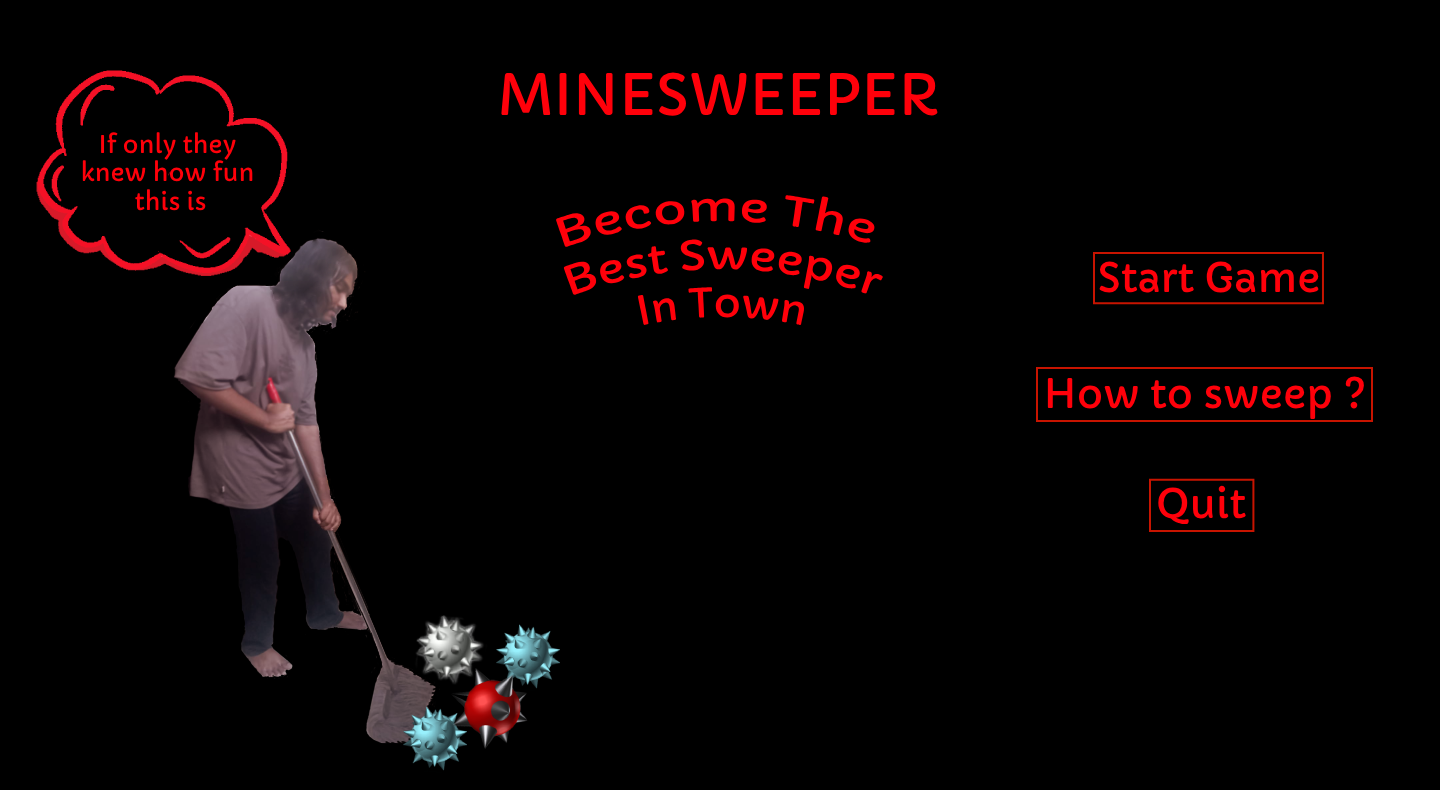
<style>
.page{position:relative;width:1440px;height:790px;background:#000000}
.page>*{position:absolute;margin:0}
.t1{font:56px "Capriola-Regular";color:#ff000a}
.t2{font:24px "Capriola-Regular";color:#ff000a}
.t3{font:40px "Capriola-Regular";color:#ff000a}
</style>
<div class="page">
<p class="t1" style="left:501px;top:72px;width:437px;height:44px">MINESWEEPER</p>
<p class="t2" style="left:82px;top:132px;width:171px;height:79px;text-align:center">If only they <br>knew how fun <br>this is</p>
<p class="t3" style="left:555px;top:195px;width:328px;height:131px;text-align:center">Become The <br>Best Sweeper<br>In Town</p>
<p class="t3" style="left:1099px;top:261px;width:220px;height:32px">Start Game</p>
<p class="t3" style="left:1047px;top:376px;width:317px;height:44px">How to sweep ?</p>
<p class="t3" style="left:1158px;top:485px;width:88px;height:39px">Quit</p>
</div>
